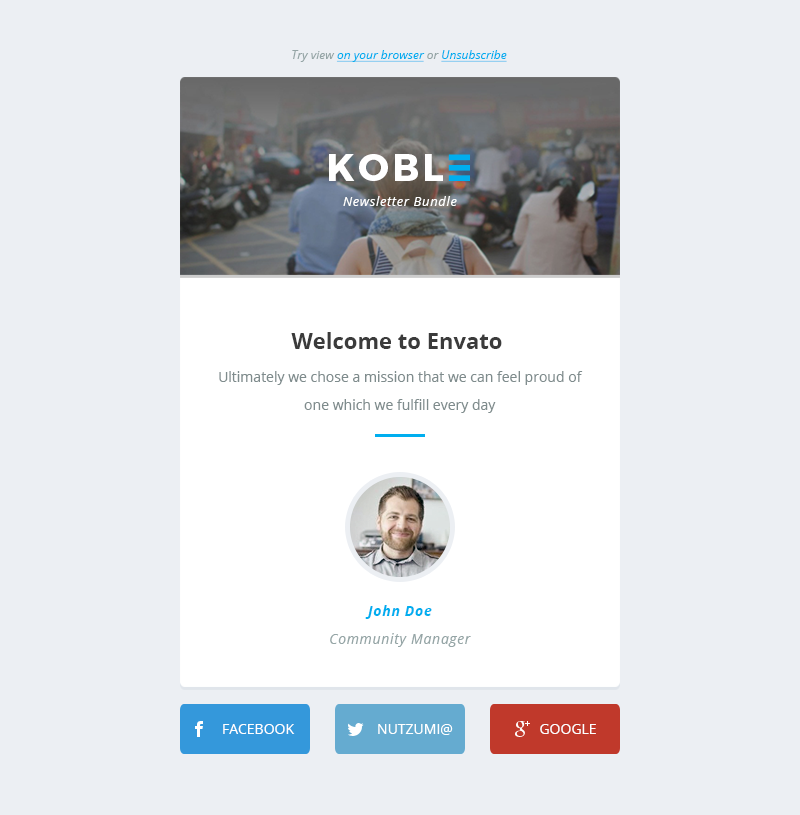
<style>
.page{position:relative;width:800px;height:815px;background:#eceff3}
.page>*{position:absolute;margin:0}
.t1{font:12px "OpenSans-Italic";color:#00aeef;text-decoration:underline}
.t2{font:12px "OpenSans-Italic";color:#95a5a6}
.t3{font:38.3px "Montserrat-Bold";letter-spacing:0.09em;color:#ffffff;text-transform:uppercase}
.t4{font:13px "OpenSans-Italic";letter-spacing:0.05em;color:#feffff}
.t5{font:22px "OpenSans-Bold";color:#3b3b3b}
.t6{font:14px/28px "OpenSans";color:#7f8c8d}
.t7{font:14px/28px "OpenSans-Italic";letter-spacing:0.05em;color:#95a5a6}
.t8{font:14px/28px "OpenSans-BoldItalic";letter-spacing:0.05em;color:#00aeef}
.t9{font:14px "OpenSans";color:#feffff;text-transform:uppercase}
</style>
<div class="page">
<p class="t1" style="left:292px;top:50px;width:215px;height:12px"><span class="t2">Try view </span>on your browser <span class="t2">or </span>Unsubscribe</p>
<p class="t3" style="left:329px;top:154px;width:114px;height:27px">kobl</p>
<p class="t4" style="left:343px;top:196px;width:114px;height:10px">Newsletter Bundle</p>
<p class="t5" style="left:291px;top:332px;width:211px;height:17px">Welcome to Envato</p>
<p class="t6" style="left:219px;top:371px;width:364px;height:42px;text-align:center">Ultimately we chose a mission that we can feel proud of  one which we fulfill every day</p>
<p class="t7" style="left:330px;top:605px;width:141px;height:42px;text-align:center"><span class="t8">John Doe<br></span>Community Manager</p>
<p class="t9" style="left:223px;top:724px;width:72px;height:10px">Facebook</p>
<p class="t9" style="left:378px;top:724px;width:75px;height:11px">@nutzumi</p>
<p class="t9" style="left:540px;top:724px;width:56px;height:10px">Google</p>
</div>
